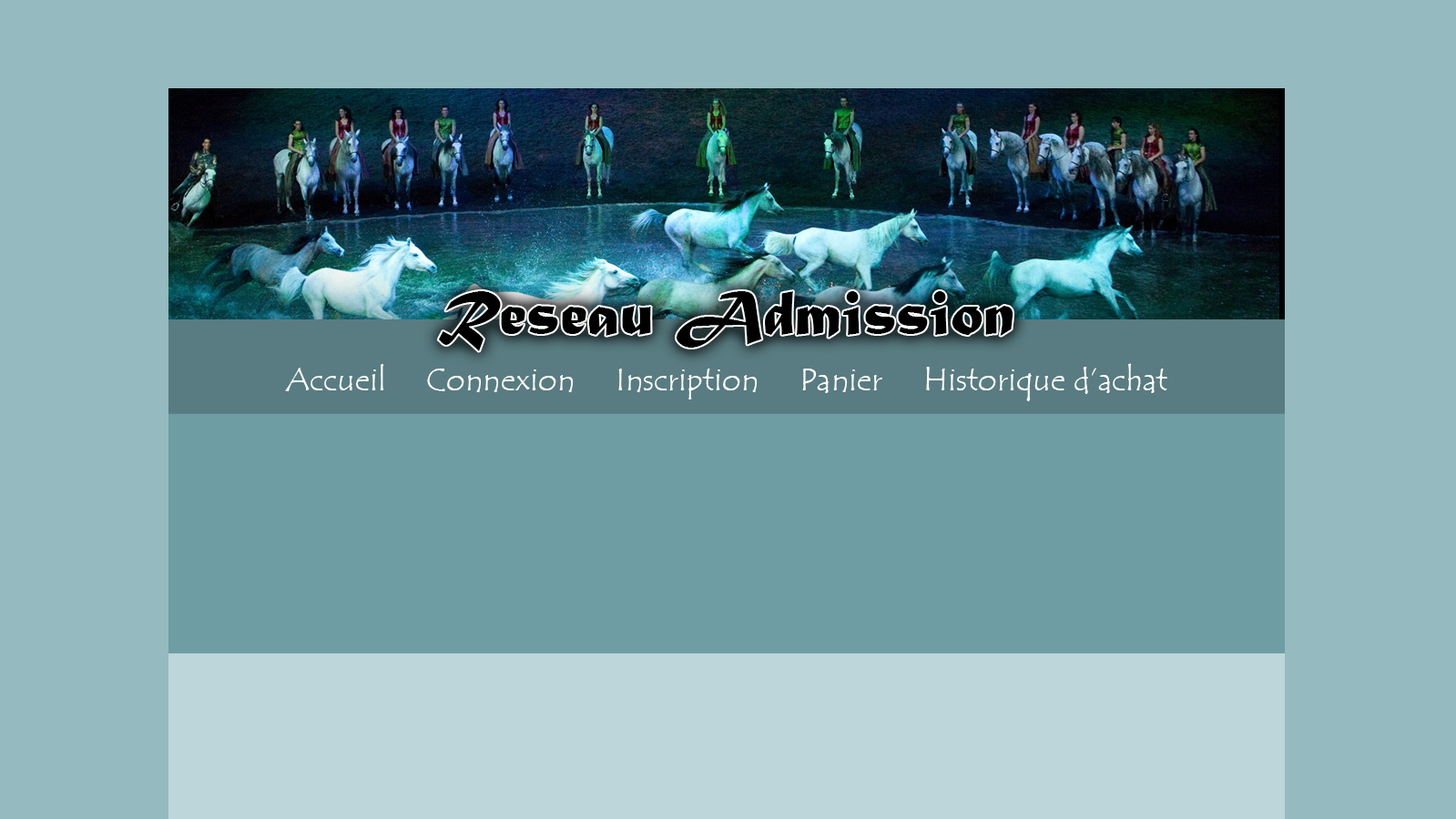
<style>
.page{position:relative;width:1456px;height:819px;background:#95babf}
.page>*{position:absolute;margin:0}
.t1{font:65.5px "MaturaMTScriptCapitals";color:#000000}
.t2{font:31.9px "TempusSansITC";color:#ffffff}
</style>
<div class="page">
<p class="t1" style="left:438px;top:291px;width:574px;height:60px">Reseau Admission</p>
<p class="t2" style="left:285px;top:363px;width:882px;height:38px">Accueil     Connexion     Inscription     Panier     Historique d’achat</p>
</div>
